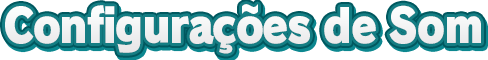
<style>
.page{position:relative;width:488px;height:60px;background:#ffffff}
.page>*{position:absolute;margin:0}
.t1{font:46.7px "RodinPro-UB";letter-spacing:-0.035em;color:#f2f2f3;scale:0.89 1}
</style>
<div class="page">
<p class="t1" style="left:5px;top:4px;width:476px;height:50px">Configurações de Som</p>
</div>
